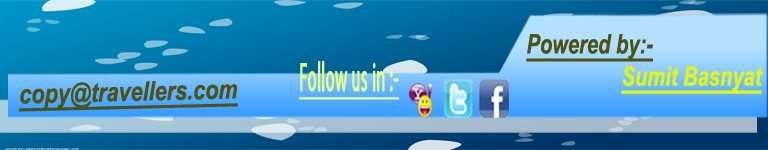
<style>
.page{position:relative;width:768px;height:150px}
.page>*{position:absolute;margin:0}
.t1{font:26.8px "Arial-BoldItalicMT";color:#e3f515;text-decoration:underline;scale:0.75 1}
.t2{font:26.8px "Arial-BoldItalicMT";color:#4d5217;text-decoration:underline;scale:0.75 1}
.t3{font:41.4px "MyriadPro-Regular";color:#e7fe88;font-weight:bold;text-decoration:underline;scale:0.4 1}
.t4{font:26.8px "Arial-BoldItalicMT";color:#4d5217;text-decoration:underline;scale:0.81 1}
</style>
<div class="page">
<p class="t1" style="left:526px;top:34px;width:237px;height:60px"><span class="t2">Powered by:-<br>                 </span>Sumit Basnyat</p>
<p class="t3" style="left:299px;top:61px;width:100px;height:39px">Follow us in :-</p>
<p class="t4" style="left:19px;top:81px;width:219px;height:31px;rotate:-1deg">copy@travellers.com</p>
</div>
